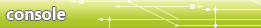
<style>
.page{position:relative;width:261px;height:28px}
.page>*{position:absolute;margin:0}
.t1{font:16.7px "SegoeUI-Bold";color:#ffffff}
</style>
<div class="page">
<p class="t1" style="left:6px;top:7px;width:60px;height:13px">console</p>
</div>
